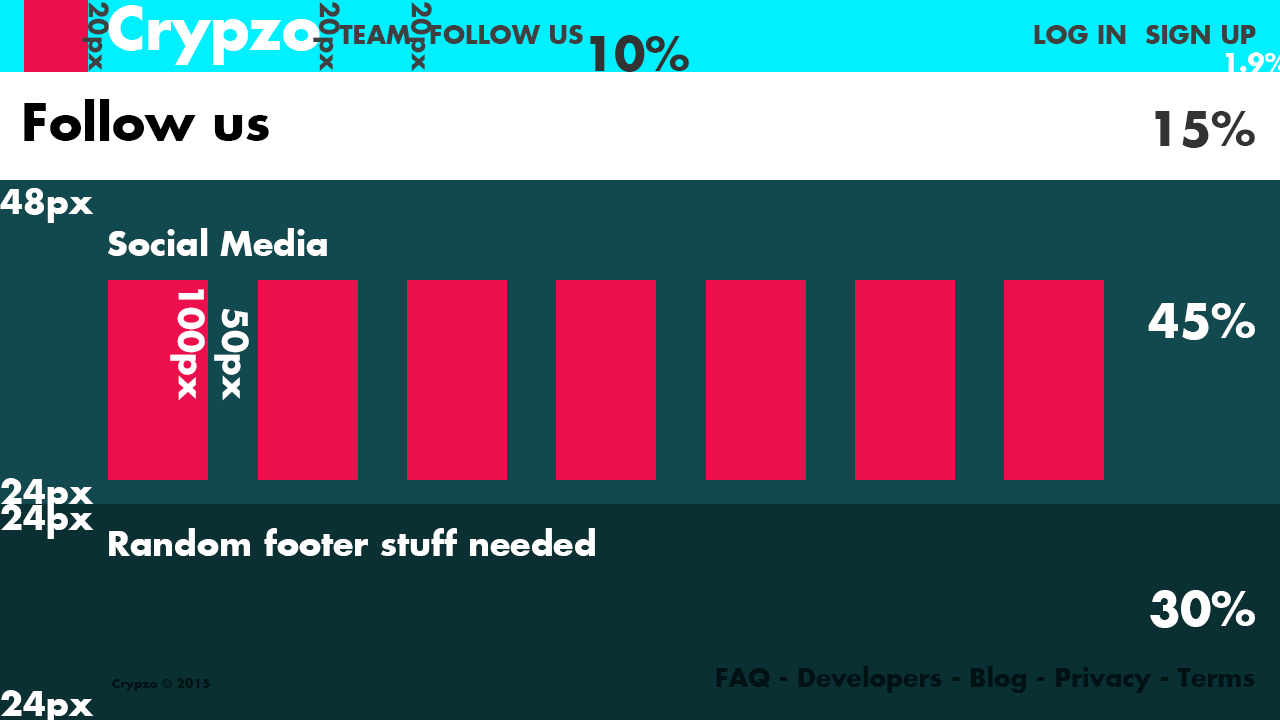
<style>
.page{position:relative;width:1280px;height:720px;background:#11494e}
.page>*{position:absolute;margin:0}
.t1{font:25.4px "FuturaKoyu";color:#404040}
.t2{font:58.3px "FuturaKoyu";color:#ffffff}
.t3{font:25px "FuturaKoyu";color:#404040}
.t4{font:45.8px "FuturaKoyu";color:#333333}
.t5{font:50px "FuturaKoyu";color:#010000}
.t6{font:33.3px "FuturaKoyu";color:#ffffff}
.t7{font:45.8px "FuturaKoyu";color:#ffffff}
.t8{font:12.5px "FuturaKoyu";color:#001214}
.t9{font:25px "FuturaKoyu";color:#001214}
</style>
<div class="page">
<p class="t1" style="left:82px;top:2px;width:27px;height:70px;rotate:90deg">20px</p>
<p class="t2" style="left:108px;top:5px;width:212px;height:60px">Crypzo</p>
<p class="t1" style="left:313px;top:2px;width:27px;height:70px;rotate:90deg">20px</p>
<p class="t1" style="left:405px;top:2px;width:27px;height:70px;rotate:90deg">20px</p>
<p class="t3" style="left:339px;top:25px;width:72px;height:19px">TEAM</p>
<p class="t1" style="left:430px;top:25px;width:153px;height:19px">FOLLOW US</p>
<p class="t1" style="left:1034px;top:25px;width:92px;height:19px">LOG IN</p>
<p class="t1" style="left:1145px;top:25px;width:111px;height:19px">SIGN UP</p>
<p class="t4" style="left:590px;top:35px;width:99px;height:37px">10%</p>
<p class="t5" style="left:24px;top:99px;width:245px;height:42px">Follow us</p>
<p class="t4" style="left:1155px;top:111px;width:100px;height:37px">15%</p>
<p class="t6" style="left:0px;top:188px;width:94px;height:35px">48px</p>
<p class="t6" style="left:108px;top:228px;width:219px;height:28px">Social Media</p>
<p class="t6" style="left:170px;top:289px;width:35px;height:112px;rotate:90deg">100px</p>
<p class="t7" style="left:1148px;top:303px;width:107px;height:37px">45%</p>
<p class="t6" style="left:214px;top:309px;width:35px;height:92px;rotate:90deg">50px</p>
<p class="t6" style="left:1px;top:478px;width:93px;height:35px">24px</p>
<p class="t6" style="left:1px;top:504px;width:93px;height:35px">24px</p>
<p class="t6" style="left:109px;top:528px;width:486px;height:28px">Random footer stuff needed</p>
<p class="t7" style="left:1150px;top:590px;width:105px;height:38px">30%</p>
<p class="t8" style="left:112px;top:678px;width:98px;height:13px">Crypzo © 2015</p>
<p class="t9" style="left:716px;top:666px;width:539px;height:27px">FAQ - Developers - Blog - Privacy - Terms</p>
</div>
